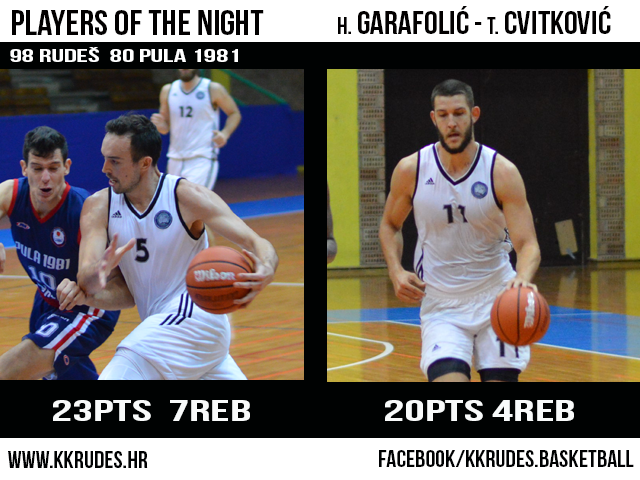
<style>
.page{position:relative;width:640px;height:480px}
.page>*{position:absolute;margin:0}
.t1{font:33px "BebasNeue";color:#020000;scale:1.04 1}
.t2{font:24px "BebasNeue";color:#020000;scale:1.04 1}
.t3{font:30px "BebasNeue";color:#020000;scale:1.04 1}
.t4{font:36px "BebasNeue";color:#020000;scale:1.04 1}
.t5{font:17.6px "BebasNeue";color:#ffffff;scale:1.77 1}
.t6{font:30px "BebasNeue";color:#f8fafa;scale:1.77 1}
.t7{font:24px "BebasNeue";color:#000102;scale:1.04 1}
.t8{font:23.5px "BebasNeue";color:#000102;scale:1.06 1}
</style>
<div class="page">
<p class="t1" style="left:338px;top:6px;width:273px;height:28px"><span class="t2">h. </span>garafolić<span class="t3"> - </span><span class="t2">T. </span>CVITKOVIĆ</p>
<p class="t4" style="left:12px;top:10px;width:252px;height:25px">PLAYERS OF THE NIGHT</p>
<p class="t5" style="left:10px;top:47px;width:228px;height:15px">98 rudeš  80 pula 1981</p>
<p class="t6" style="left:53px;top:400px;width:197px;height:21px">23pts  7reb</p>
<p class="t6" style="left:385px;top:400px;width:189px;height:21px">20pts 4reb</p>
<p class="t7" style="left:8px;top:451px;width:140px;height:17px">www.kkrudes.hr</p>
<p class="t8" style="left:379px;top:450px;width:255px;height:17px">facebook/kkrudes.basketball</p>
</div>
